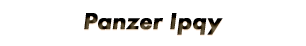
<style>
.page{position:relative;width:306px;height:46px;background:#ffffff}
.page>*{position:absolute;margin:0}
.t1{font:24px "FuturaPT-HeavyObl";font-weight:bold}
</style>
<div class="page">
<p class="t1" style="left:84px;top:13px;width:139px;height:22px">Panzer Ipqy</p>
</div>
